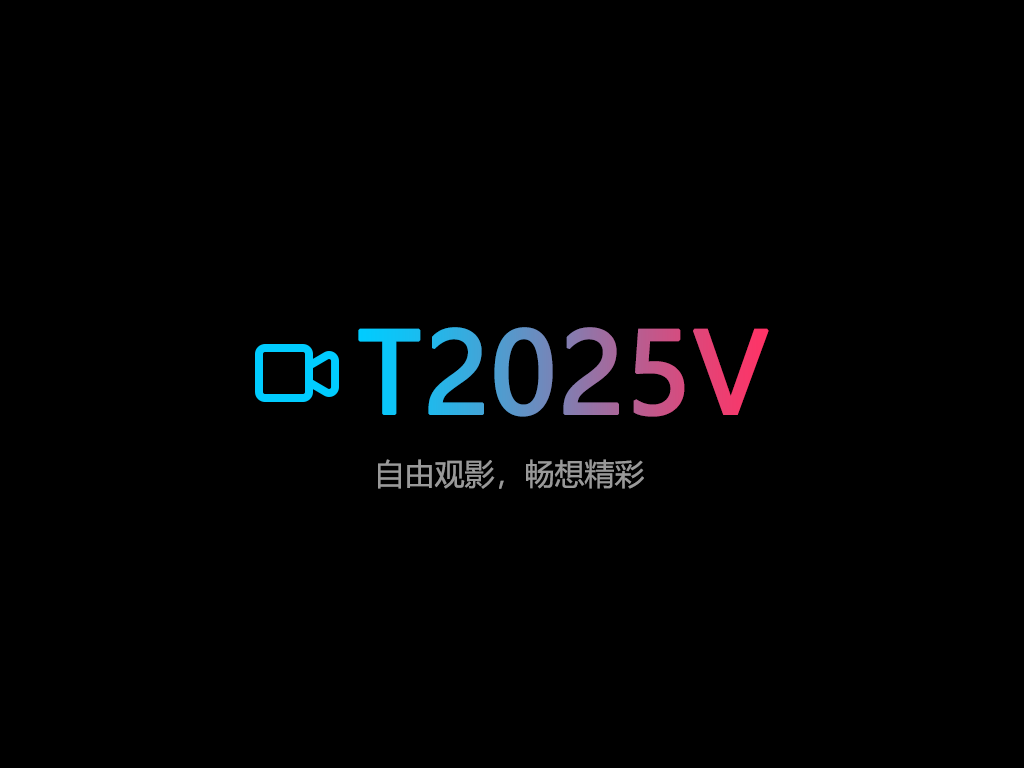
<style>
.page{position:relative;width:1024px;height:768px;background:#000000}
.page>*{position:absolute;margin:0}
.t1{font:110px "MicrosoftYaHei";font-weight:bold}
.t2{font:30px "MicrosoftYaHei";color:#999999}
</style>
<div class="page">
<p class="t1" style="left:358px;top:327px;width:411px;height:90px">T2025V</p>
<p class="t2" style="left:378px;top:459px;width:266px;height:30px">自由观影，畅想精彩</p>
</div>
